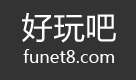
<style>
.page{position:relative;width:136px;height:80px;background:#333333}
.page>*{position:absolute;margin:0}
.t1{font:32px "FZLTHK--GBK1-0";color:#ffffff}
.t2{font:17px "MicrosoftYaHei";color:#ffffff}
</style>
<div class="page">
<p class="t1" style="left:22px;top:12px;width:94px;height:31px">好玩吧</p>
<p class="t2" style="left:23px;top:49px;width:91px;height:14px">funet8.com</p>
</div>
